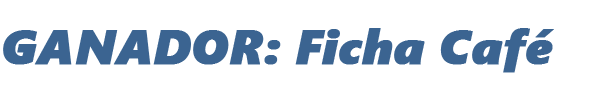
<style>
.page{position:relative;width:608px;height:100px;background:#ffffff}
.page>*{position:absolute;margin:0}
.t1{font:48px "SegoeUIBlack-Italic";color:#3b6491;font-weight:bold}
</style>
<div class="page">
<p class="t1" style="left:3px;top:28px;width:551px;height:45px">GANADOR: Ficha Café</p>
</div>
